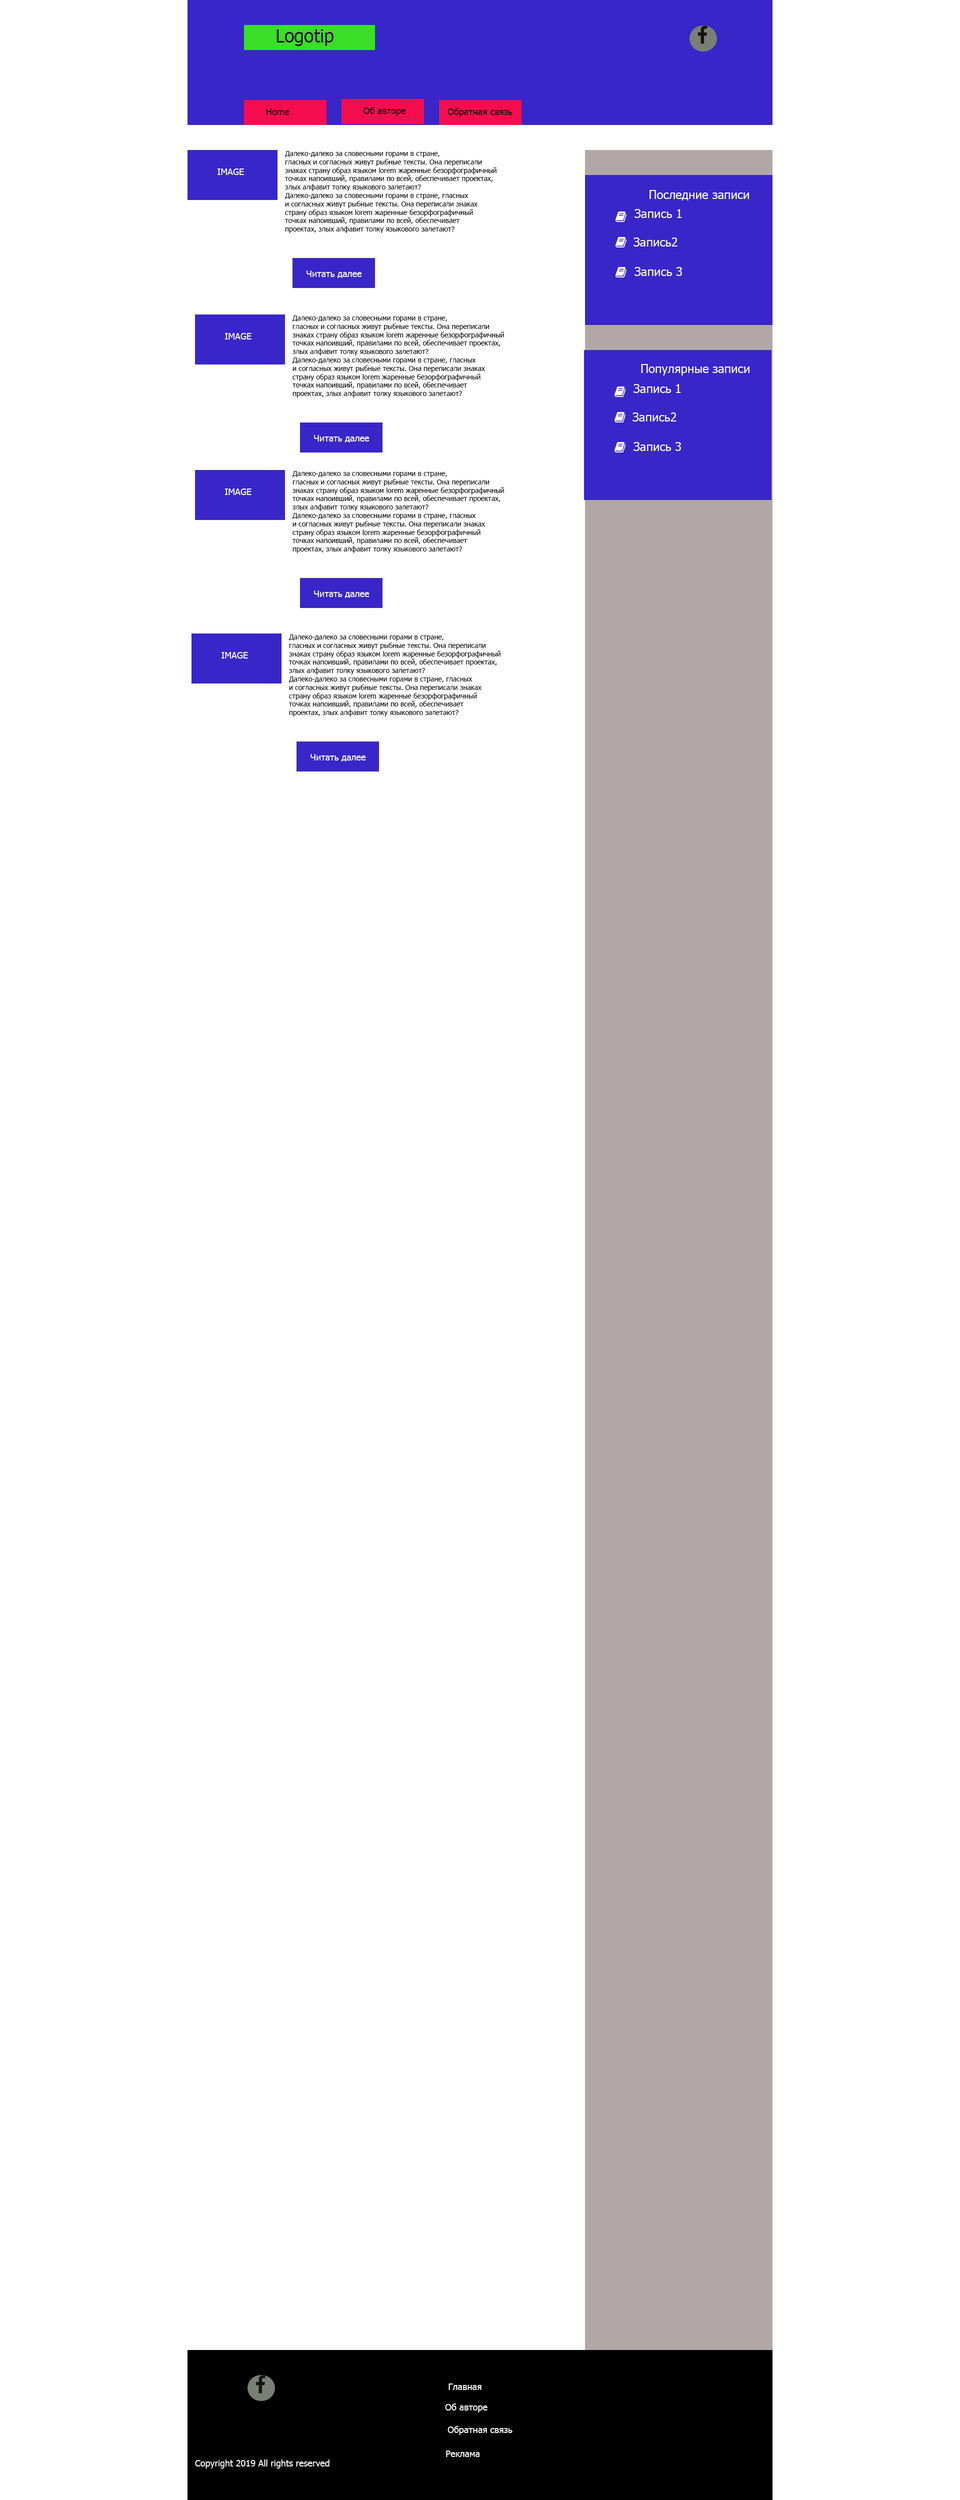
<style>
.page{position:relative;width:960px;height:2500px;background:#ffffff}
.page>*{position:absolute;margin:0}
.t1{font:18px "Tahoma";color:#000000}
.t2{font:9px "Tahoma";color:#0e0d0d}
.t3{font:7px "Tahoma";color:#0c0c0c}
.t4{font:9px "Tahoma";color:#fefefe}
.t5{font:12px "Tahoma";color:#ffffff}
.t6{font:9px "Tahoma";color:#f9f9fb}
</style>
<div class="page">
<p class="t1" style="left:276px;top:30px;width:58px;height:16px">Logotip</p>
<p class="t2" style="left:266px;top:108px;width:23px;height:7px">Home</p>
<p class="t2" style="left:364px;top:107px;width:42px;height:9px">Об авторе</p>
<p class="t2" style="left:448px;top:108px;width:64px;height:9px">Обратная связь</p>
<p class="t3" style="left:284px;top:151px;width:212px;height:82px">Далеко-далеко за словесными горами в стране, <br>гласных и согласных живут рыбные тексты. Она переписали <br>знаках страну образ языком lorem жаренные безорфографичный <br>точках напоивший, правилами по всей, обеспечивает проектах, <br>злых алфавит толку языкового залетают?<br>Далеко-далеко за словесными горами в стране, гласных <br>и согласных живут рыбные тексты. Она переписали знаках <br>страну образ языком lorem жаренные безорфографичный <br>точках напоивший, правилами по всей, обеспечивает <br>проектах, злых алфавит толку языкового залетают?</p>
<p class="t4" style="left:218px;top:168px;width:26px;height:7px">IMAGE</p>
<p class="t5" style="left:650px;top:190px;width:99px;height:10px">Последние записи</p>
<p class="t5" style="left:634px;top:209px;width:48px;height:9px">Запись 1</p>
<p class="t5" style="left:634px;top:238px;width:44px;height:8px">Запись 2</p>
<p class="t5" style="left:634px;top:267px;width:48px;height:9px">Запись 3</p>
<p class="t6" style="left:306px;top:270px;width:56px;height:8px">Читать далее</p>
<p class="t3" style="left:292px;top:316px;width:212px;height:82px">Далеко-далеко за словесными горами в стране, <br>гласных и согласных живут рыбные тексты. Она переписали <br>знаках страну образ языком lorem жаренные безорфографичный <br>точках напоивший, правилами по всей, обеспечивает проектах, <br>злых алфавит толку языкового залетают?<br>Далеко-далеко за словесными горами в стране, гласных <br>и согласных живут рыбные тексты. Она переписали знаках <br>страну образ языком lorem жаренные безорфографичный <br>точках напоивший, правилами по всей, обеспечивает <br>проектах, злых алфавит толку языкового залетают?</p>
<p class="t4" style="left:225px;top:333px;width:27px;height:7px">IMAGE</p>
<p class="t5" style="left:641px;top:364px;width:109px;height:12px">Популярные записи</p>
<p class="t5" style="left:634px;top:384px;width:47px;height:9px">Запись 1</p>
<p class="t5" style="left:632px;top:412px;width:44px;height:10px">Запись 2</p>
<p class="t6" style="left:314px;top:435px;width:56px;height:7px">Читать далее</p>
<p class="t5" style="left:634px;top:442px;width:47px;height:9px">Запись 3</p>
<p class="t3" style="left:292px;top:471px;width:212px;height:82px">Далеко-далеко за словесными горами в стране, <br>гласных и согласных живут рыбные тексты. Она переписали <br>знаках страну образ языком lorem жаренные безорфографичный <br>точках напоивший, правилами по всей, обеспечивает проектах, <br>злых алфавит толку языкового залетают?<br>Далеко-далеко за словесными горами в стране, гласных <br>и согласных живут рыбные тексты. Она переписали знаках <br>страну образ языком lorem жаренные безорфографичный <br>точках напоивший, правилами по всей, обеспечивает <br>проектах, злых алфавит толку языкового залетают?</p>
<p class="t4" style="left:225px;top:488px;width:27px;height:7px">IMAGE</p>
<p class="t6" style="left:314px;top:590px;width:56px;height:8px">Читать далее</p>
<p class="t3" style="left:288px;top:634px;width:212px;height:82px">Далеко-далеко за словесными горами в стране, <br>гласных и согласных живут рыбные тексты. Она переписали <br>знаках страну образ языком lorem жаренные безорфографичный <br>точках напоивший, правилами по всей, обеспечивает проектах, <br>злых алфавит толку языкового залетают?<br>Далеко-далеко за словесными горами в стране, гласных <br>и согласных живут рыбные тексты. Она переписали знаках <br>страну образ языком lorem жаренные безорфографичный <br>точках напоивший, правилами по всей, обеспечивает <br>проектах, злых алфавит толку языкового залетают?</p>
<p class="t4" style="left:222px;top:652px;width:26px;height:6px">IMAGE</p>
<p class="t6" style="left:310px;top:754px;width:56px;height:8px">Читать далее</p>
<p class="t6" style="left:448px;top:2384px;width:34px;height:6px">Главная</p>
<p class="t6" style="left:445px;top:2404px;width:43px;height:8px">Об авторе</p>
<p class="t6" style="left:448px;top:2426px;width:64px;height:9px">Обратная связь</p>
<p class="t6" style="left:446px;top:2450px;width:34px;height:7px">Реклама</p>
<p class="t6" style="left:195px;top:2460px;width:135px;height:8px">Copyright 2019 All rights reserved</p>
</div>
